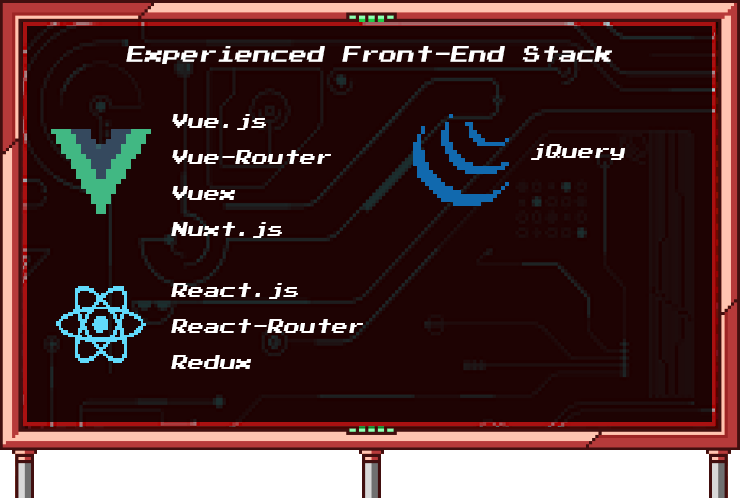
<style>
.page{position:relative;width:740px;height:498px;background:#1e0303}
.page>*{position:absolute;margin:0}
.t1{font:18px "PressStart2P";color:#ffffff;font-style:italic}
.t2{font:16px/36px "PressStart2P";color:#ffffff;font-style:italic}
.t3{font:16px "PressStart2P";color:#ffffff;font-style:italic}
</style>
<div class="page">
<p class="t1" style="left:126px;top:46px;width:486px;height:18px">Experienced Front-End Stack</p>
<p class="t2" style="left:171px;top:114px;width:160px;height:124px">Vue.js<br>Vue-Router<br>Vuex<br>Nuxt.js</p>
<p class="t3" style="left:531px;top:144px;width:94px;height:16px">jQuery</p>
<p class="t2" style="left:171px;top:283px;width:192px;height:86px">React.js<br>React-Router<br>Redux</p>
</div>
